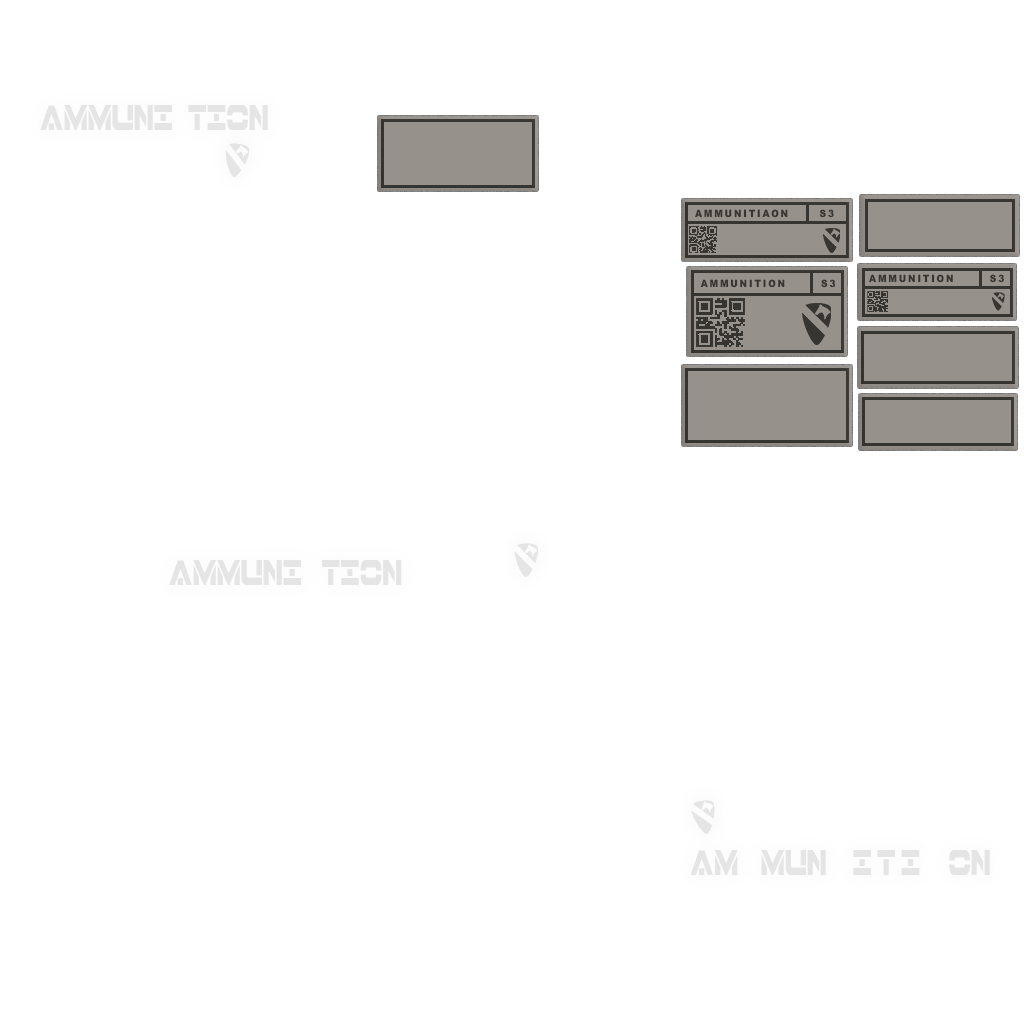
<style>
.page{position:relative;width:1024px;height:1024px;background:#ffffff}
.page>*{position:absolute;margin:0}
.t1{font:33px "7thServiceExtraBold";letter-spacing:-0.02em;color:#e2e2e2;text-transform:uppercase;scale:0.6 1}
.t2{font:10px "Arial-Black";letter-spacing:0.22em;color:#373531;text-transform:uppercase;scale:0.89 1}
.t3{font:33px "7thServiceExtraBold";letter-spacing:0.22em;color:#e2e2e2;text-transform:uppercase;scale:0.6 1}
</style>
<div class="page">
<p class="t1" style="left:40px;top:105px;width:228px;height:25px">AMMUNI TION</p>
<p class="t2" style="left:695px;top:209px;width:139px;height:9px">Ammunitiaon      S3</p>
<p class="t2" style="left:700px;top:279px;width:136px;height:9px">Ammunition       S3</p>
<p class="t2" style="left:869px;top:274px;width:135px;height:9px">Ammunition       S3</p>
<p class="t1" style="left:169px;top:560px;width:233px;height:25px">AMMUNI TION</p>
<p class="t1" style="left:690px;top:850px;width:300px;height:25px">AM MUN <span class="t3">ITI </span>ON</p>
</div>
